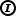
<style>
.page{position:relative;width:16px;height:16px;background:#ffffff}
.page>*{position:absolute;margin:0}
.t1{font:12px "BookmanOldStyle-BoldItalic";color:#000000}
</style>
<div class="page">
<p class="t1" style="left:4px;top:4px;width:7px;height:8px">I</p>
</div>
